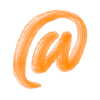
<style>
.page{position:relative;width:100px;height:100px;background:#ffffff}
.page>*{position:absolute;margin:0}
.t1{font:182.3px "MacbethReguler";color:#ff8f0b}
</style>
<div class="page">
<p class="t1" style="left:12px;top:9px;width:76px;height:80px">@</p>
</div>
